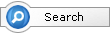
<style>
.page{position:relative;width:110px;height:35px;background:#ffffff}
.page>*{position:absolute;margin:0}
.t1{font:11px "Verdana";color:#000000}
</style>
<div class="page">
<p class="t1" style="left:45px;top:12px;width:38px;height:9px">Search</p>
</div>
